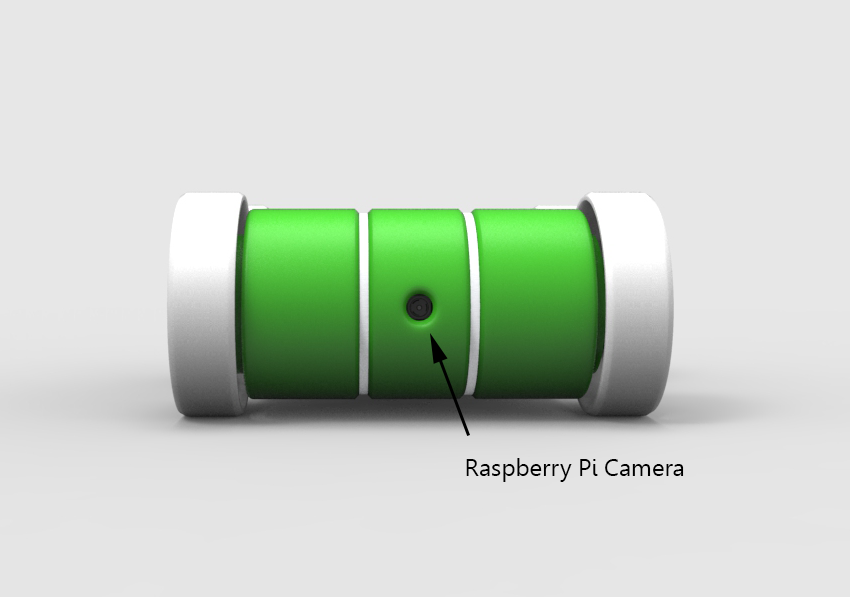
<style>
.page{position:relative;width:850px;height:597px;background:#e7e7e7}
.page>*{position:absolute;margin:0}
.t1{font:24px "Leelawadee";color:#000000}
</style>
<div class="page">
<p class="t1" style="left:466px;top:458px;width:218px;height:24px">Raspberry Pi Camera</p>
</div>
